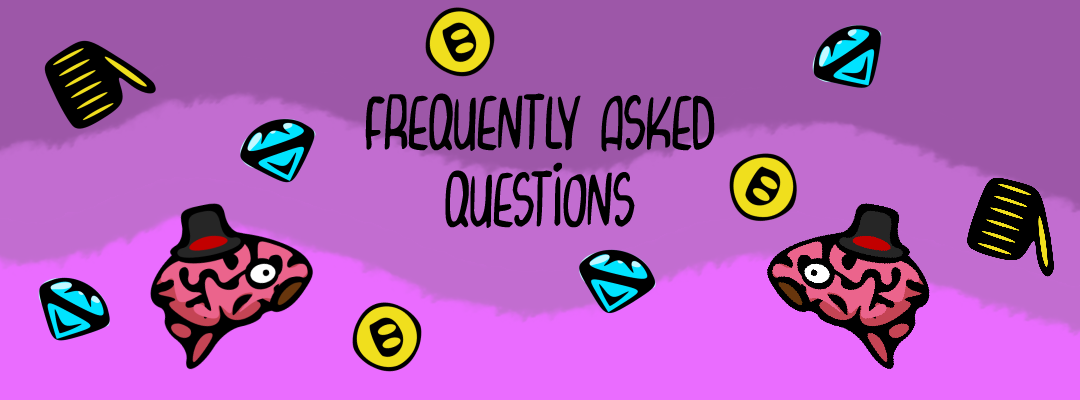
<style>
.page{position:relative;width:1080px;height:400px;background:#9d57a8}
.page>*{position:absolute;margin:0}
.t1{font:64px "CurvyThins";color:#000000}
</style>
<div class="page">
<p class="t1" style="left:365px;top:93px;width:350px;height:136px;text-align:center">Frequently asked<br>questions</p>
</div>
